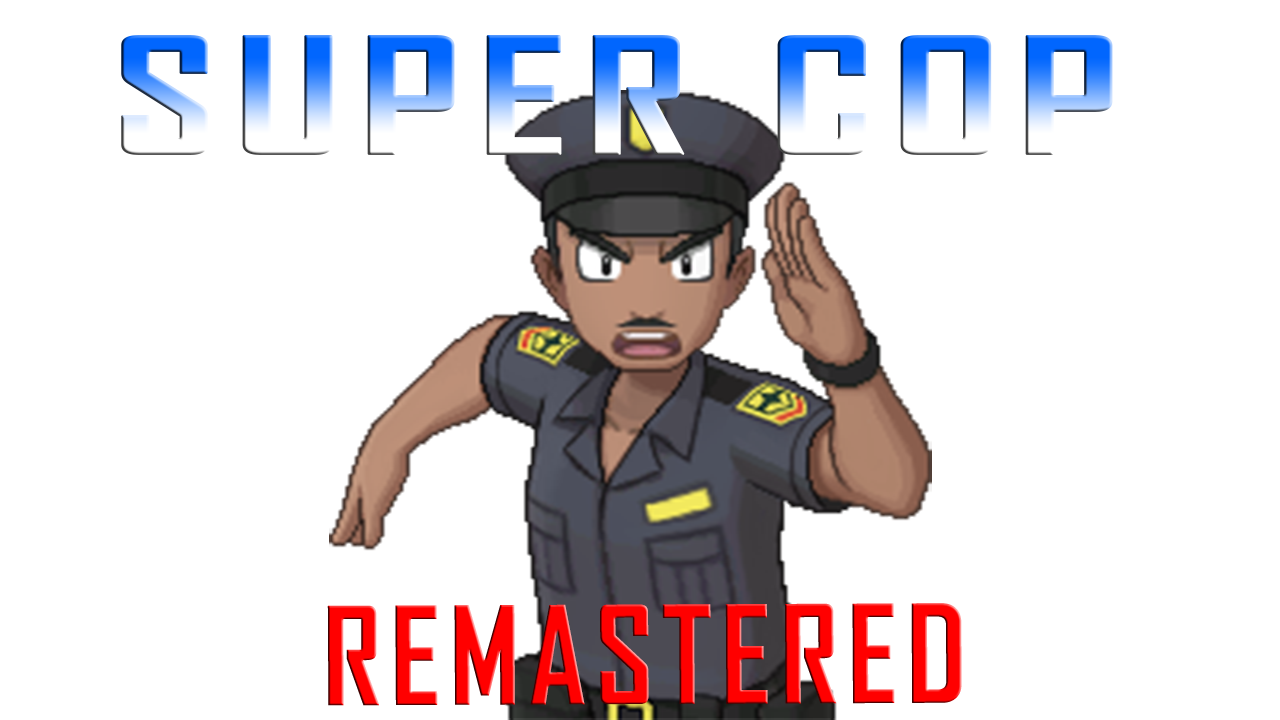
<style>
.page{position:relative;width:1280px;height:720px;background:#ffffff}
.page>*{position:absolute;margin:0}
.t1{font:155.5px "AgencyFB-Bold";letter-spacing:0.04em;font-weight:bold;scale:1.48 1}
.t2{font:129.6px "AgencyFB-Bold";letter-spacing:0.04em;color:#ff0000;font-weight:bold}
</style>
<div class="page">
<p class="t1" style="left:121px;top:35px;width:992px;height:120px">SUPER COP</p>
<p class="t2" style="left:327px;top:603px;width:635px;height:103px">REMASTERED</p>
</div>
